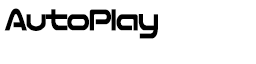
<style>
.page{position:relative;width:256px;height:64px;background:#ffffff}
.page>*{position:absolute;margin:0}
.t1{font:36px "NicoKaku";letter-spacing:-0.08em;color:#000000;scale:0.85 1}
</style>
<div class="page">
<p class="t1" style="left:4px;top:8px;width:154px;height:31px">AutoPlay</p>
</div>
